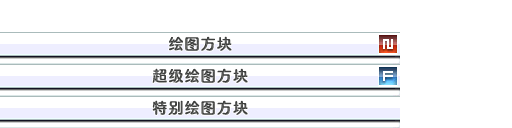
<style>
.page{position:relative;width:512px;height:128px;background:#ffffff}
.page>*{position:absolute;margin:0}
.t1{font:14.7px "FZFW-QingYinTiS-B--GB1-0";letter-spacing:0.1em;color:#3d3e3d}
</style>
<div class="page">
<p class="t1" style="left:169px;top:36px;width:63px;height:15px">绘图方块</p>
<p class="t1" style="left:152px;top:68px;width:96px;height:15px">超级绘图方块</p>
<p class="t1" style="left:152px;top:100px;width:96px;height:15px">特别绘图方块</p>
</div>
